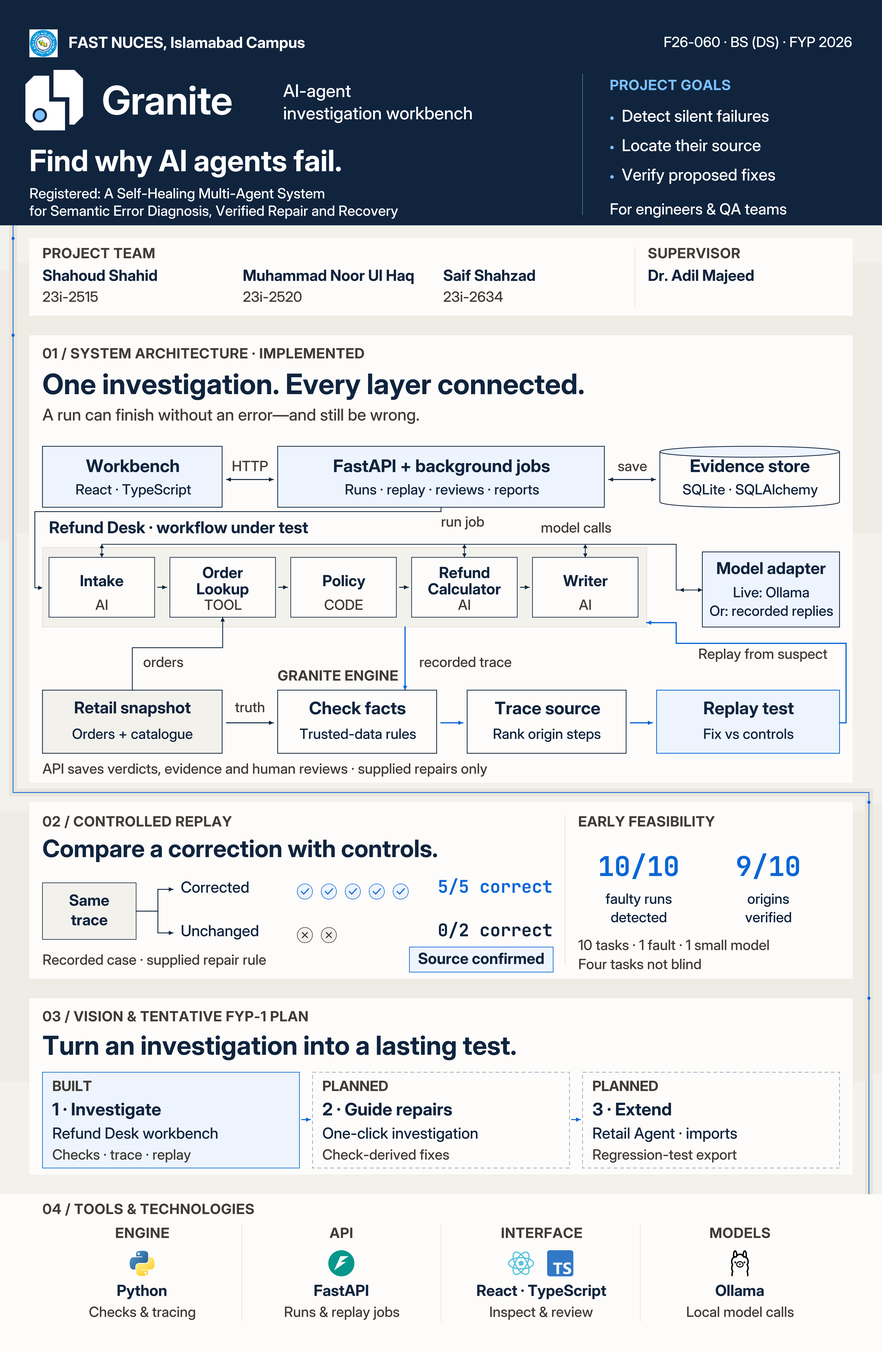
<style>
.page{position:relative;width:882px;height:1352px;background:#fdfcfa}
.page>*{position:absolute;margin:0}
.t1{font:15.2px "Inter-Bold";color:#ffffff}
.t2{font:17.4px "Inter-Medium";color:#ffffff}
.t3{font:14.2px "Inter-Bold";letter-spacing:0.031em;color:#7cc0ff}
.t4{font:16.3px "Inter-Medium";color:#ffffff}
.t5{font:29.4px "Inter-Bold";color:#ffffff}
.t6{font:14.2px "Inter-Medium";color:#ffffff}
.t7{font:15.2px "Inter-Medium";color:#ffffff}
.t8{font:14.2px "Inter-Bold";letter-spacing:0.031em;color:#403c36}
.t9{font:15.2px "Inter-Bold";color:#10243e}
.t10{font:14.2px "Inter-Medium";color:#403c36}
.t11{font:28.3px "Inter-Bold";color:#10243e}
.t12{font:16.3px "Inter-Medium";color:#403c36}
.t13{font:17.4px "Inter-Bold";color:#10243e}
.t14{font:14.2px "Inter-Medium";color:#10243e}
.t15{font:16.3px "Inter-Bold";color:#10243e}
.t16{font:14.2px "Inter-Bold";letter-spacing:0.023em;color:#403c36}
.t17{font:24px "Inter-Bold";color:#10243e}
.t18{font:27.2px "JetBrainsMono-Bold";color:#0a66d6}
.t19{font:15.2px "Inter-Medium";color:#10243e}
.t20{font:17.4px "JetBrainsMono-Bold";color:#0a66d6}
.t21{font:17.4px "JetBrainsMono-Bold";color:#10243e}
.t22{font:26.1px "Inter-Bold";color:#10243e}
.t23{font:14.2px "Inter-Bold";color:#403c36}
</style>
<div class="page">
<p class="t1" style="left:68px;top:36px;width:319px;height:24px">FAST NUCES, Islamabad Campus</p>
<p class="t2" style="left:283px;top:83px;width:93px;height:28px">AI-agent</p>
<p class="t3" style="left:609px;top:79px;width:164px;height:23px">PROJECT GOALS</p>
<p class="t2" style="left:283px;top:105px;width:255px;height:28px">investigation workbench</p>
<p class="t4" style="left:621px;top:108px;width:201px;height:27px">Detect silent failures</p>
<p class="t4" style="left:621px;top:138px;width:190px;height:26px">Locate their source</p>
<p class="t5" style="left:29px;top:148px;width:423px;height:46px">Find why AI agents fail.</p>
<p class="t4" style="left:621px;top:167px;width:208px;height:27px">Verify proposed fixes</p>
<p class="t6" style="left:29px;top:187px;width:397px;height:23px">Registered: A Self-Healing Multi-Agent System</p>
<p class="t6" style="left:29px;top:204px;width:494px;height:24px">for Semantic Error Diagnosis, Verified Repair and Recovery</p>
<p class="t7" style="left:609px;top:202px;width:240px;height:25px">For engineers &amp; QA teams</p>
<p class="t8" style="left:42px;top:247px;width:154px;height:23px">PROJECT TEAM</p>
<p class="t8" style="left:647px;top:247px;width:127px;height:23px">SUPERVISOR</p>
<p class="t9" style="left:42px;top:268px;width:159px;height:25px">Shahoud Shahid</p>
<p class="t9" style="left:242px;top:268px;width:235px;height:25px">Muhammad Noor Ul Haq</p>
<p class="t9" style="left:443px;top:268px;width:127px;height:25px">Saif Shahzad</p>
<p class="t9" style="left:647px;top:268px;width:144px;height:25px">Dr. Adil Majeed</p>
<p class="t10" style="left:42px;top:290px;width:76px;height:24px">23i-2515</p>
<p class="t10" style="left:242px;top:290px;width:82px;height:24px">23i-2520</p>
<p class="t10" style="left:443px;top:290px;width:82px;height:24px">23i-2634</p>
<p class="t8" style="left:42px;top:347px;width:435px;height:23px">01 / SYSTEM ARCHITECTURE · IMPLEMENTED</p>
<p class="t11" style="left:42px;top:371px;width:731px;height:45px">One investigation. Every layer connected.</p>
<p class="t12" style="left:42px;top:407px;width:512px;height:27px">A run can finish without an error—and still be wrong.</p>
<p class="t13" style="left:86px;top:458px;width:127px;height:28px">Workbench</p>
<p class="t10" style="left:231px;top:459px;width:51px;height:24px">HTTP</p>
<p class="t13" style="left:333px;top:458px;width:293px;height:28px">FastAPI + background jobs</p>
<p class="t10" style="left:617px;top:459px;width:41px;height:24px">save</p>
<p class="t13" style="left:689px;top:458px;width:164px;height:28px">Evidence store</p>
<p class="t14" style="left:75px;top:483px;width:156px;height:23px">React · TypeScript</p>
<p class="t14" style="left:344px;top:483px;width:262px;height:23px">Runs · replay · reviews · reports</p>
<p class="t14" style="left:682px;top:483px;width:184px;height:23px">SQLite · SQLAlchemy</p>
<p class="t15" style="left:49px;top:520px;width:350px;height:27px">Refund Desk · workflow under test</p>
<p class="t10" style="left:441px;top:515px;width:60px;height:23px">run job</p>
<p class="t10" style="left:540px;top:521px;width:97px;height:23px">model calls</p>
<p class="t9" style="left:202px;top:566px;width:57px;height:25px">Order</p>
<p class="t9" style="left:438px;top:566px;width:71px;height:25px">Refund</p>
<p class="t15" style="left:716px;top:561px;width:149px;height:26px">Model adapter</p>
<p class="t9" style="left:79px;top:574px;width:62px;height:25px">Intake</p>
<p class="t9" style="left:322px;top:574px;width:59px;height:25px">Policy</p>
<p class="t9" style="left:563px;top:574px;width:61px;height:25px">Writer</p>
<p class="t9" style="left:196px;top:582px;width:73px;height:25px">Lookup</p>
<p class="t9" style="left:427px;top:582px;width:101px;height:25px">Calculator</p>
<p class="t14" style="left:732px;top:586px;width:105px;height:23px">Live: Ollama</p>
<p class="t10" style="left:95px;top:598px;width:19px;height:24px">AI</p>
<p class="t10" style="left:204px;top:598px;width:52px;height:24px">TOOL</p>
<p class="t10" style="left:324px;top:598px;width:54px;height:24px">CODE</p>
<p class="t10" style="left:457px;top:598px;width:20px;height:24px">AI</p>
<p class="t10" style="left:578px;top:598px;width:20px;height:24px">AI</p>
<p class="t14" style="left:709px;top:604px;width:168px;height:24px">Or: recorded replies</p>
<p class="t10" style="left:698px;top:647px;width:175px;height:24px">Replay from suspect</p>
<p class="t10" style="left:143px;top:655px;width:56px;height:24px">orders</p>
<p class="t10" style="left:419px;top:655px;width:126px;height:24px">recorded trace</p>
<p class="t16" style="left:277px;top:669px;width:164px;height:24px">GRANITE ENGINE</p>
<p class="t15" style="left:74px;top:700px;width:159px;height:27px">Retail snapshot</p>
<p class="t10" style="left:235px;top:701px;width:42px;height:23px">truth</p>
<p class="t13" style="left:309px;top:700px;width:132px;height:28px">Check facts</p>
<p class="t13" style="left:494px;top:700px;width:143px;height:28px">Trace source</p>
<p class="t13" style="left:703px;top:700px;width:123px;height:28px">Replay test</p>
<p class="t14" style="left:72px;top:727px;width:164px;height:24px">Orders + catalogue</p>
<p class="t14" style="left:299px;top:727px;width:158px;height:24px">Trusted-data rules</p>
<p class="t14" style="left:492px;top:727px;width:148px;height:24px">Rank origin steps</p>
<p class="t14" style="left:703px;top:727px;width:123px;height:24px">Fix vs controls</p>
<p class="t10" style="left:42px;top:762px;width:597px;height:24px">API saves verdicts, evidence and human reviews · supplied repairs only</p>
<p class="t8" style="left:42px;top:815px;width:255px;height:23px">02 / CONTROLLED REPLAY</p>
<p class="t16" style="left:578px;top:815px;width:183px;height:23px">EARLY FEASIBILITY</p>
<p class="t17" style="left:42px;top:838px;width:536px;height:38px">Compare a correction with controls.</p>
<p class="t18" style="left:597px;top:854px;width:113px;height:43px">10/10</p>
<p class="t18" style="left:735px;top:854px;width:90px;height:43px">9/10</p>
<p class="t19" style="left:180px;top:880px;width:95px;height:25px">Corrected</p>
<p class="t20" style="left:437px;top:879px;width:157px;height:28px">5/5 correct</p>
<p class="t9" style="left:69px;top:893px;width:56px;height:25px">Same</p>
<p class="t14" style="left:605px;top:892px;width:92px;height:24px">faulty runs</p>
<p class="t14" style="left:747px;top:892px;width:58px;height:24px">origins</p>
<p class="t9" style="left:70px;top:913px;width:52px;height:25px">trace</p>
<p class="t14" style="left:610px;top:911px;width:78px;height:23px">detected</p>
<p class="t14" style="left:745px;top:911px;width:64px;height:23px">verified</p>
<p class="t19" style="left:180px;top:924px;width:109px;height:25px">Unchanged</p>
<p class="t21" style="left:437px;top:922px;width:157px;height:28px">0/2 correct</p>
<p class="t10" style="left:578px;top:939px;width:259px;height:23px">10 tasks · 1 fault · 1 small model</p>
<p class="t10" style="left:42px;top:953px;width:303px;height:24px">Recorded case · supplied repair rule</p>
<p class="t9" style="left:417px;top:952px;width:173px;height:25px">Source confirmed</p>
<p class="t10" style="left:578px;top:958px;width:168px;height:23px">Four tasks not blind</p>
<p class="t8" style="left:42px;top:1010px;width:357px;height:23px">03 / VISION &amp; TENTATIVE FYP-1 PLAN</p>
<p class="t22" style="left:42px;top:1034px;width:637px;height:41px">Turn an investigation into a lasting test.</p>
<p class="t23" style="left:52px;top:1080px;width:54px;height:23px">BUILT</p>
<p class="t23" style="left:322px;top:1080px;width:91px;height:23px">PLANNED</p>
<p class="t23" style="left:592px;top:1080px;width:91px;height:23px">PLANNED</p>
<p class="t13" style="left:52px;top:1101px;width:147px;height:29px">1 · Investigate</p>
<p class="t13" style="left:322px;top:1101px;width:176px;height:29px">2 · Guide repairs</p>
<p class="t13" style="left:592px;top:1101px;width:109px;height:29px">3 · Extend</p>
<p class="t19" style="left:52px;top:1126px;width:226px;height:25px">Refund Desk workbench</p>
<p class="t19" style="left:322px;top:1126px;width:212px;height:25px">One-click investigation</p>
<p class="t19" style="left:592px;top:1126px;width:197px;height:25px">Retail Agent · imports</p>
<p class="t10" style="left:52px;top:1148px;width:188px;height:23px">Checks · trace · replay</p>
<p class="t10" style="left:322px;top:1148px;width:171px;height:23px">Check-derived fixes</p>
<p class="t10" style="left:592px;top:1148px;width:195px;height:23px">Regression-test export</p>
<p class="t8" style="left:42px;top:1203px;width:286px;height:23px">04 / TOOLS &amp; TECHNOLOGIES</p>
<p class="t8" style="left:115px;top:1227px;width:75px;height:23px">ENGINE</p>
<p class="t8" style="left:329px;top:1227px;width:34px;height:23px">API</p>
<p class="t8" style="left:500px;top:1227px;width:110px;height:23px">INTERFACE</p>
<p class="t8" style="left:709px;top:1227px;width:84px;height:23px">MODELS</p>
<p class="t9" style="left:116px;top:1284px;width:71px;height:25px">Python</p>
<p class="t9" style="left:313px;top:1284px;width:77px;height:25px">FastAPI</p>
<p class="t9" style="left:476px;top:1284px;width:175px;height:25px">React · TypeScript</p>
<p class="t9" style="left:715px;top:1284px;width:68px;height:25px">Ollama</p>
<p class="t10" style="left:88px;top:1305px;width:146px;height:24px">Checks &amp; tracing</p>
<p class="t10" style="left:284px;top:1305px;width:157px;height:24px">Runs &amp; replay jobs</p>
<p class="t10" style="left:489px;top:1305px;width:140px;height:24px">Inspect &amp; review</p>
<p class="t10" style="left:686px;top:1305px;width:147px;height:24px">Local model calls</p>
</div>
